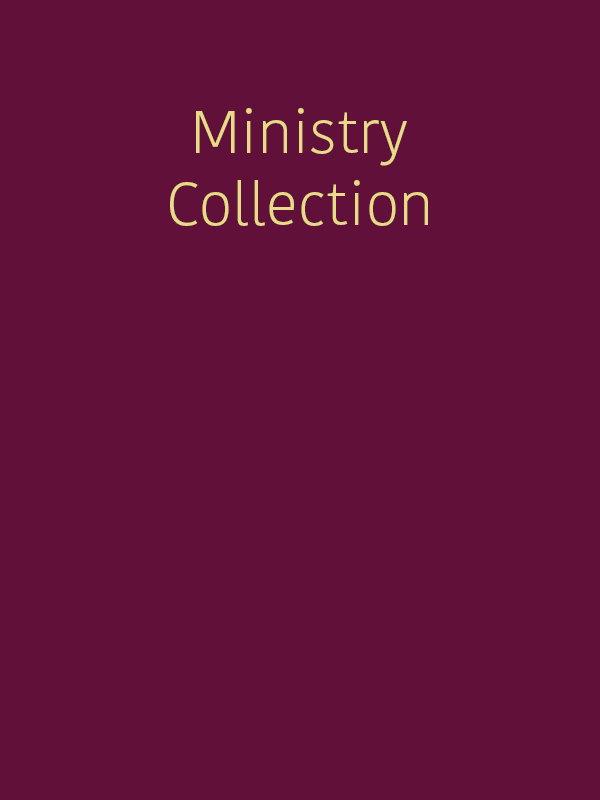
<style>
.page{position:relative;width:600px;height:800px;background:#61103a}
.page>*{position:absolute;margin:0}
.t1{font:60px "KohinoorBangla-Light";color:#e8db87}
</style>
<div class="page">
<p class="t1" style="left:170px;top:108px;width:258px;height:118px;text-align:center">Ministry<br>Collection</p>
</div>
